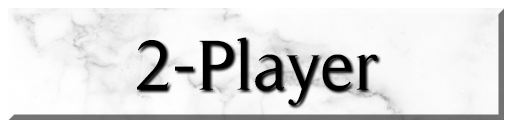
<style>
.page{position:relative;width:512px;height:128px}
.page>*{position:absolute;margin:0}
.t1{font:72px "Timeless-Normal";color:#000000}
</style>
<div class="page">
<p class="t1" style="left:137px;top:37px;width:241px;height:69px">2-Player</p>
</div>
